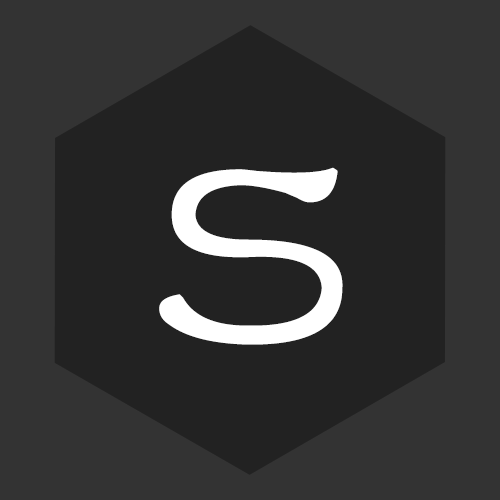
<style>
.page{position:relative;width:500px;height:500px;background:#222222}
.page>*{position:absolute;margin:0}
.t1{font:400px "FZSTK--GBK1-0";letter-spacing:0.12em;color:#ffffff}
</style>
<div class="page">
<p class="t1" style="left:159px;top:167px;width:184px;height:178px">s</p>
</div>
